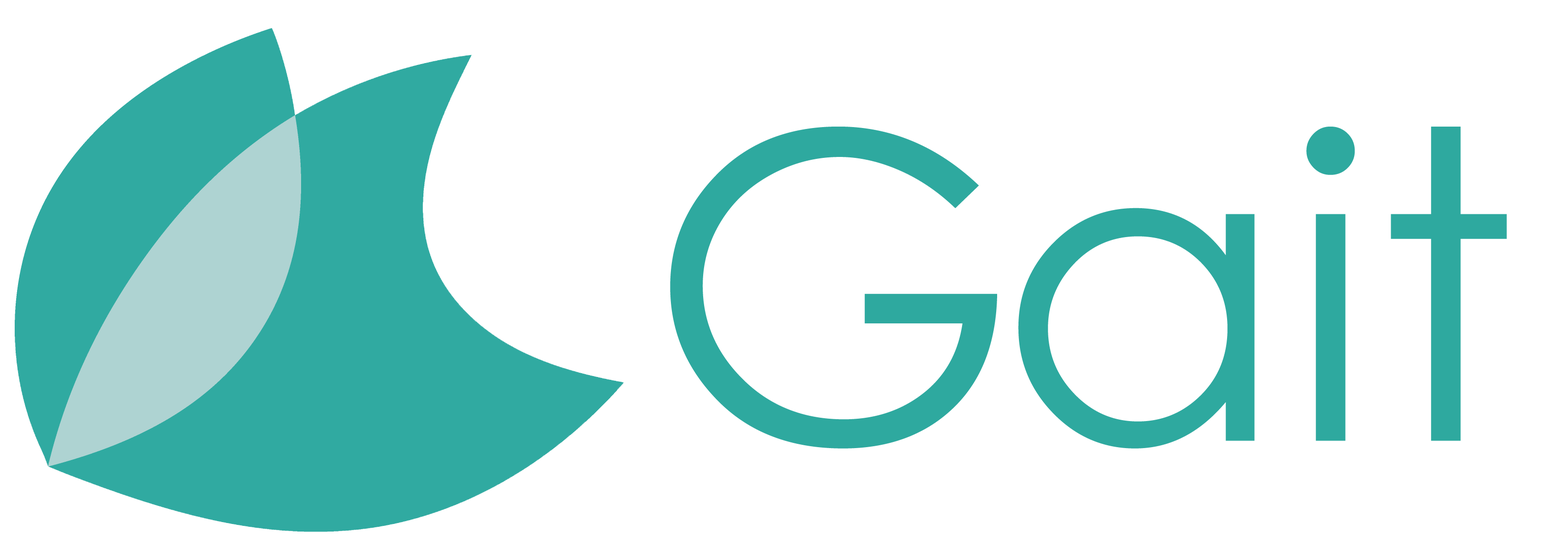
<style>
.page{position:relative;width:1568px;height:560px;background:#ffffff}
.page>*{position:absolute;margin:0}
.t1{font:426.7px "STXihei";color:#2ea99f}
</style>
<div class="page">
<p class="t1" style="left:670px;top:127px;width:837px;height:322px">Gait</p>
</div>
